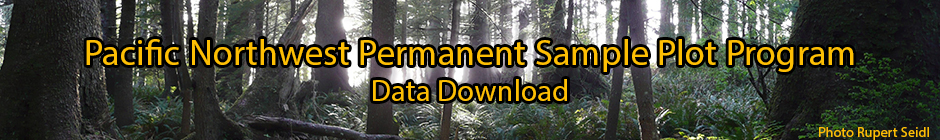
<style>
.page{position:relative;width:940px;height:140px}
.page>*{position:absolute;margin:0}
.t1{font:36px "MyriadPro-Regular";letter-spacing:0.01em;color:#fdbf04}
.t2{font:30px "MyriadPro-Regular";letter-spacing:0.01em;color:#fdbf04}
.t3{font:14px "MyriadPro-Regular";letter-spacing:0.01em;color:#fdbf04}
</style>
<div class="page">
<p class="t1" style="left:86px;top:39px;width:768px;height:62px;text-align:center">Pacific Northwest Permanent Sample Plot Program<br><span class="t2">Data Download</span></p>
<p class="t3" style="left:819px;top:127px;width:110px;height:13px">Photo Rupert Seidl</p>
</div>
